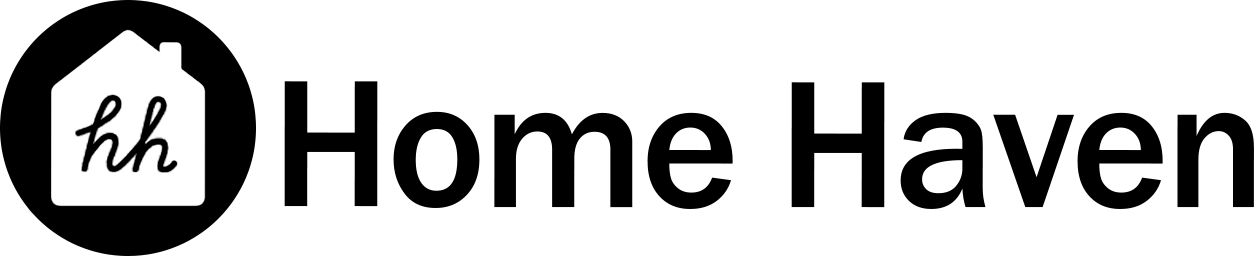
<style>
.page{position:relative;width:1256px;height:256px;background:#ffffff}
.page>*{position:absolute;margin:0}
.t1{font:187px "FranklinGothic-Medium";letter-spacing:-0.02em;color:#000000}
</style>
<div class="page">
<p class="t1" style="left:284px;top:81px;width:970px;height:128px">Home Haven</p>
</div>
